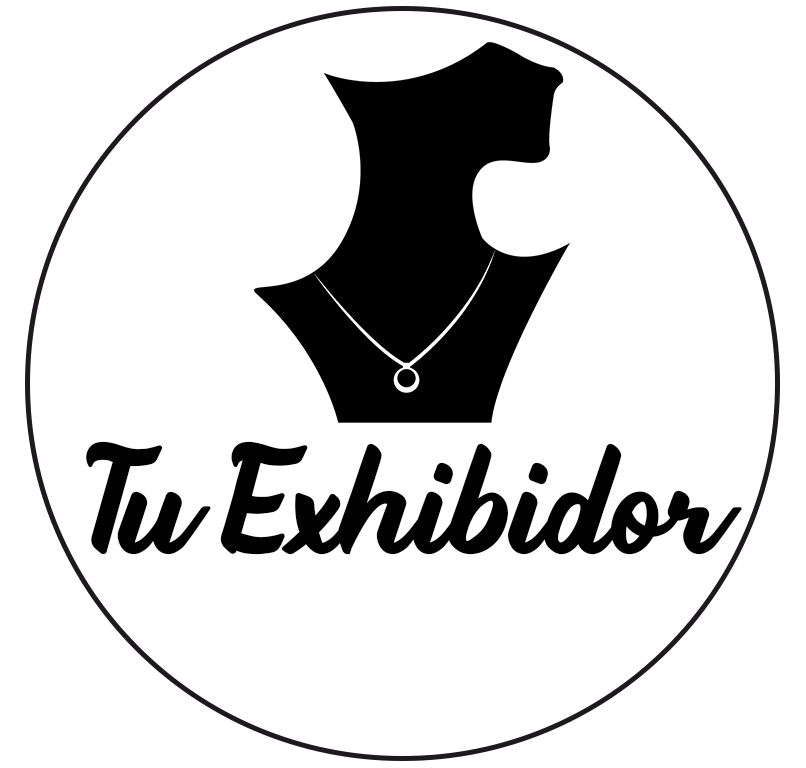
<style>
.page{position:relative;width:806px;height:768px;background:#ffffff}
.page>*{position:absolute;margin:0}
.t1{font:120.8px "Beathy";letter-spacing:-0.01em;color:#010101;font-weight:bold}
</style>
<div class="page">
<p class="t1" style="left:86px;top:441px;width:656px;height:114px">Tu Exhibidor</p>
</div>
